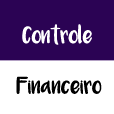
<style>
.page{position:relative;width:114px;height:114px;background:#2b0354}
.page>*{position:absolute;margin:0}
.t1{font:12.5px "Luna";color:#ffffff;font-weight:bold}
.t2{font:12.5px "Luna";color:#010101;font-weight:bold}
</style>
<div class="page">
<p class="t1" style="left:22px;top:24px;width:70px;height:21px">Controle</p>
<p class="t2" style="left:16px;top:76px;width:86px;height:18px">Financeiro</p>
</div>
